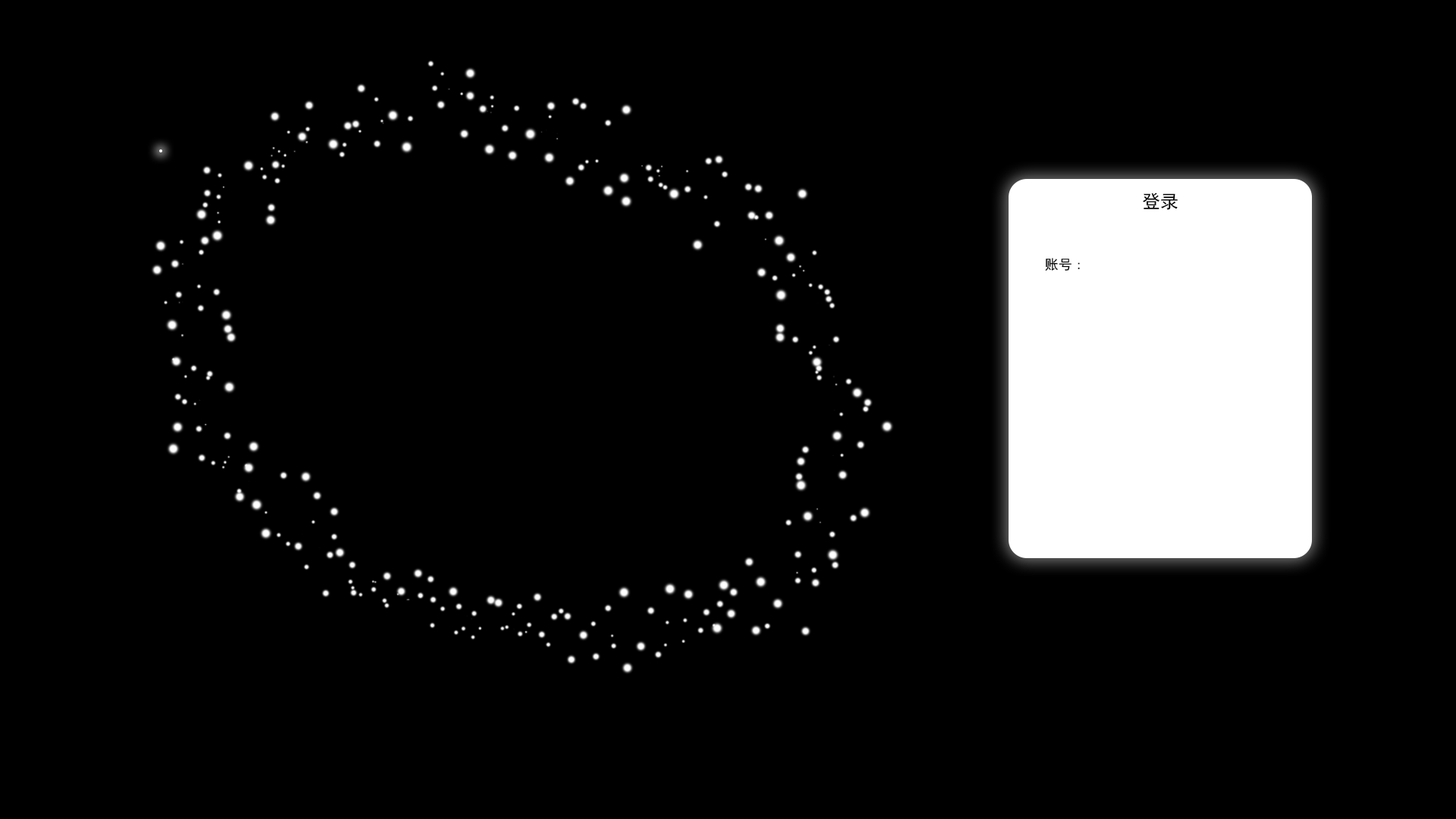
<style>
.page{position:relative;width:1456px;height:819px;background:#000000}
.page>*{position:absolute;margin:0}
.t1{font:18.2px "SimHei";color:#000000}
.t2{font:13.6px "SimHei";color:#000000}
</style>
<div class="page">
<p class="t1" style="left:1143px;top:193px;width:35px;height:17px">登录</p>
<p class="t2" style="left:1045px;top:258px;width:35px;height:13px">账号:</p>
</div>
